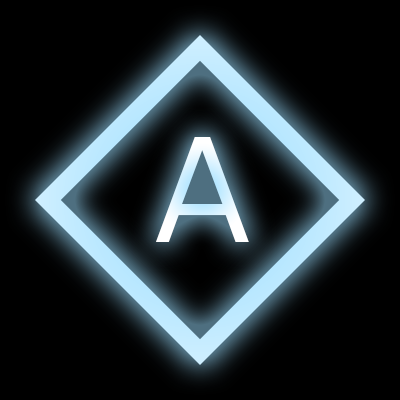
<style>
.page{position:relative;width:400px;height:400px;background:#000000}
.page>*{position:absolute;margin:0}
.t1{font:150px "Purista"}
</style>
<div class="page">
<p class="t1" style="left:156px;top:137px;width:93px;height:105px">A</p>
</div>
